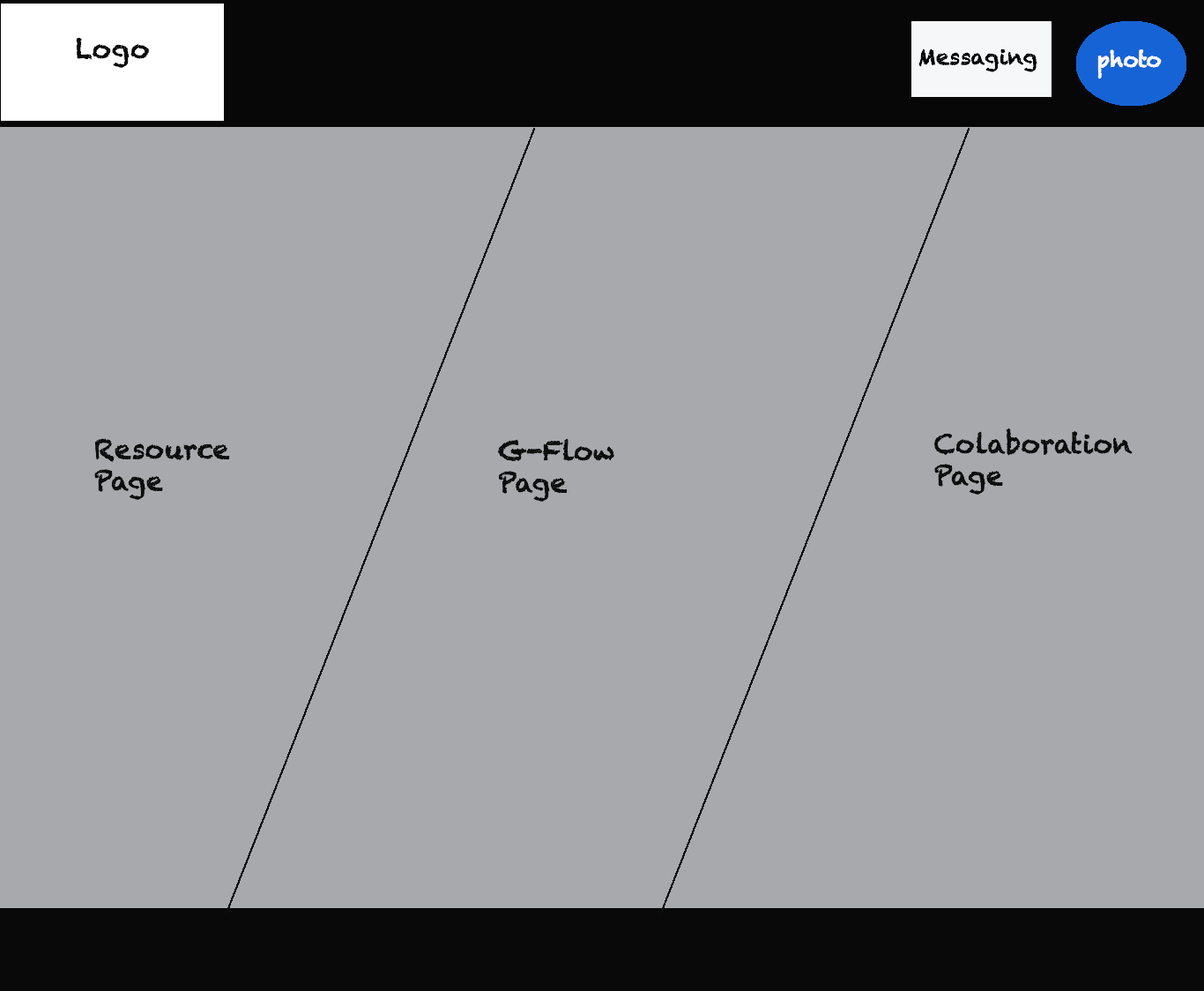
<style>
.page{position:relative;width:1204px;height:991px;background:#a7a9ac}
.page>*{position:absolute;margin:0}
.t1{font:26.4px "Chalkduster";color:#0c0d0d}
</style>
<div class="page">
<p class="t1" style="left:94px;top:438px;width:136px;height:62px">Resource<br>Page</p>
<p class="t1" style="left:498px;top:438px;width:116px;height:63px">G-Flow<br>Page</p>
<p class="t1" style="left:933px;top:427px;width:199px;height:67px">Colaboration<br>Page</p>
</div>
